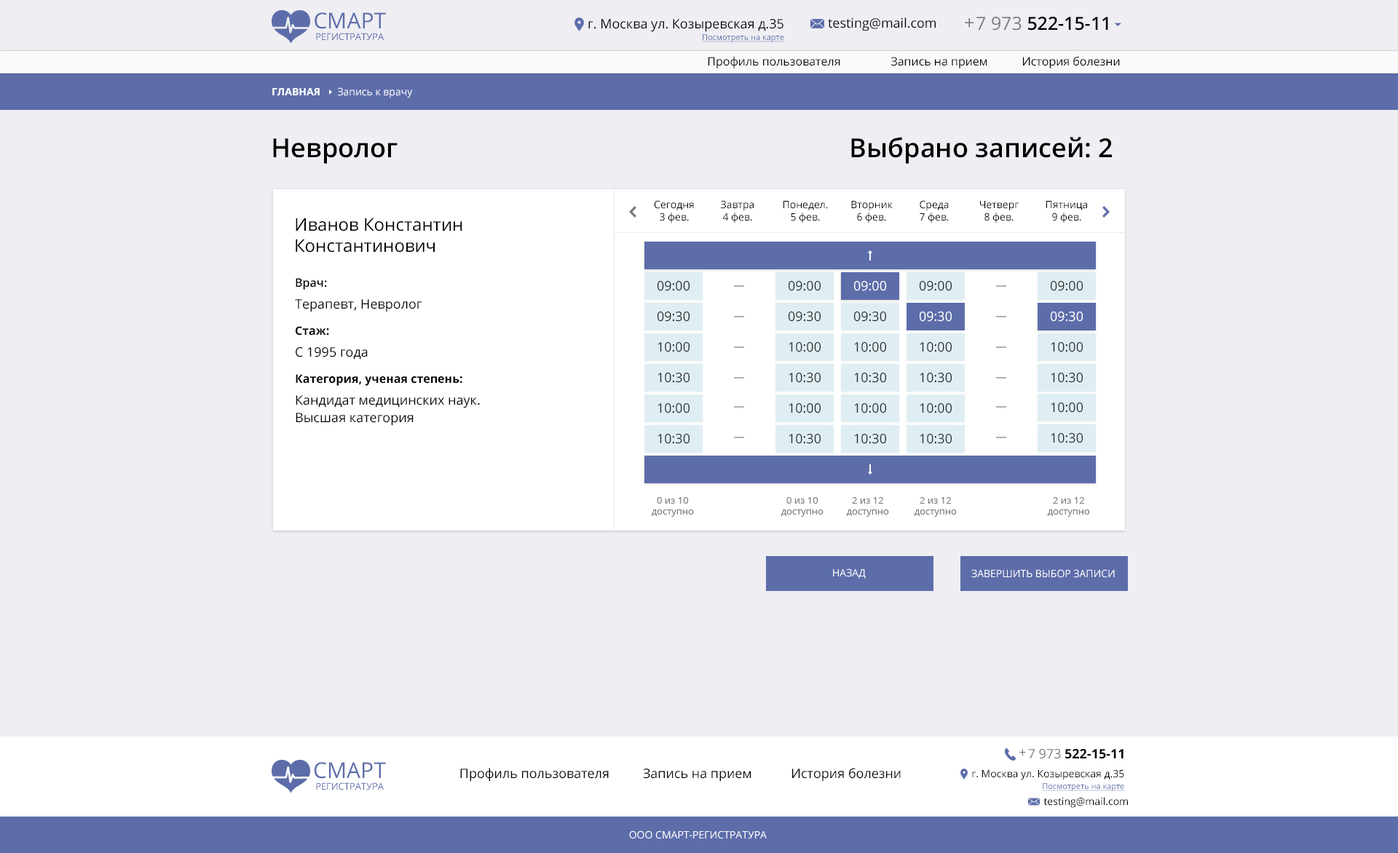
<style>
.page{position:relative;width:1398px;height:853px;background:#eeeef3}
.page>*{position:absolute;margin:0}
.t1{font:9.5px/11.6px "OpenSans";letter-spacing:-0.005em;color:#5d6daa}
.t2{font:21.8px/11.6px "OpenSans";color:#5d6daa}
.t3{font:13.1px "OpenSans";color:#000000}
.t4{font:18.2px "OpenSans-Semibold";color:#000000}
.t5{font:18.2px "OpenSans";color:#000000}
.t6{font:18.2px "OpenSans";color:#7b7b81}
.t7{font:13.1px/10.2px "OpenSans";color:#000000}
.t8{font:8px/11.6px "OpenSans";color:#5d6daa;text-decoration:underline}
.t9{font:11.6px "OpenSans";color:#000000}
.t10{font:10.2px "OpenSans";color:#ffffff}
.t11{font:10.2px "OpenSans-Bold";color:#ffffff}
.t12{font:26.3px "OpenSans-Semibold";color:#000000}
.t13{font:10.2px "OpenSans";color:#000000}
.t14{font:17.5px "OpenSans";color:#000000}
.t15{font:11.6px/26.2px "OpenSans-Bold";color:#000000}
.t16{font:11.6px/17.5px "OpenSans-Semibold";color:#000000}
.t17{font:13.1px/21.8px "OpenSans";color:#000000}
.t18{font:13.1px/17.5px "OpenSans";color:#000000}
.t19{font:13.1px "OpenSans";color:#2d2d2d}
.t20{font:13.1px "OpenSans";color:#ffffff}
.t21{font:13.1px "OpenSans";color:#fffefe}
.t22{font:9.5px "OpenSans";color:#7b7b81}
.t23{font:10.2px "OpenSans";color:#ffffff;text-transform:uppercase}
.t24{font:13.1px "OpenSans";color:#7b7b81}
.t25{font:13.1px "OpenSans-Bold";color:#000000}
.t26{font:10.2px/10.2px "OpenSans";color:#000000}
</style>
<div class="page">
<p class="t1" style="left:314px;top:12px;width:72px;height:28px;text-align:center"><span class="t2">CМАРТ<br></span>РЕГИСТРАТУРА</p>
<p class="t3" style="left:828px;top:17px;width:107px;height:14px">testing@mail.com</p>
<p class="t4" style="left:976px;top:17px;width:132px;height:14px"><span class="t5">  </span><span class="t6">7 973 </span>522-15-11</p>
<p class="t7" style="left:588px;top:19px;width:196px;height:23px;text-align:right">г. Москва ул. Козыревская д.35<br><span class="t8">Посмотреть на карте</span></p>
<p class="t6" style="left:965px;top:18px;width:8px;height:10px">+</p>
<p class="t9" style="left:708px;top:56px;width:412px;height:12px">Профиль пользователя  Запись на прием  История болезни</p>
<p class="t10" style="left:272px;top:87px;width:141px;height:11px"><span class="t11">ГЛАВНАЯ      </span>Запись к врачу</p>
<p class="t12" style="left:851px;top:137px;width:261px;height:27px">Выбрано записей: 2</p>
<p class="t12" style="left:273px;top:138px;width:124px;height:26px">Невролог</p>
<p class="t13" style="left:654px;top:200px;width:40px;height:23px;text-align:center">Сегодня<br>3 фев.</p>
<p class="t13" style="left:721px;top:200px;width:32px;height:23px;text-align:center">Завтра<br>4 фев.</p>
<p class="t13" style="left:783px;top:201px;width:45px;height:22px;text-align:center">Понедел.<br>5 фев.</p>
<p class="t13" style="left:851px;top:201px;width:41px;height:22px;text-align:center">Вторник<br>6 фев.</p>
<p class="t13" style="left:919px;top:200px;width:30px;height:23px;text-align:center">Среда<br>7 фев.</p>
<p class="t13" style="left:980px;top:201px;width:38px;height:22px;text-align:center">Четверг<br>8 фев.</p>
<p class="t13" style="left:1046px;top:201px;width:41px;height:22px;text-align:center">Пятница<br>9 фев.</p>
<p class="t14" style="left:296px;top:218px;width:166px;height:35px">Иванов Константин<br>Константинович</p>
<p class="t15" style="left:295px;top:278px;width:185px;height:148px"><span class="t16">Врач:<br></span><span class="t17">Терапевт, Невролог<br></span>Стаж:<br><span class="t17">С 1995 года<br></span>Категория, ученая степень:<br><span class="t17">Кандидат медицинских наук. <br></span><span class="t18">Высшая категория</span></p>
<p class="t19" style="left:657px;top:281px;width:32px;height:10px">09:00</p>
<p class="t19" style="left:788px;top:281px;width:32px;height:10px">09:00</p>
<p class="t20" style="left:854px;top:281px;width:32px;height:10px">09:00</p>
<p class="t19" style="left:919px;top:281px;width:32px;height:10px">09:00</p>
<p class="t19" style="left:1050px;top:281px;width:32px;height:10px">09:00</p>
<p class="t19" style="left:657px;top:312px;width:32px;height:10px">09:30</p>
<p class="t19" style="left:788px;top:312px;width:32px;height:10px">09:30</p>
<p class="t19" style="left:854px;top:312px;width:32px;height:10px">09:30</p>
<p class="t20" style="left:919px;top:312px;width:32px;height:10px">09:30</p>
<p class="t21" style="left:1050px;top:312px;width:32px;height:10px">09:30</p>
<p class="t19" style="left:657px;top:342px;width:32px;height:10px">10:00</p>
<p class="t19" style="left:788px;top:342px;width:32px;height:10px">10:00</p>
<p class="t19" style="left:854px;top:342px;width:32px;height:10px">10:00</p>
<p class="t19" style="left:919px;top:342px;width:32px;height:10px">10:00</p>
<p class="t19" style="left:1050px;top:342px;width:32px;height:10px">10:00</p>
<p class="t19" style="left:657px;top:373px;width:32px;height:10px">10:30</p>
<p class="t19" style="left:788px;top:373px;width:32px;height:10px">10:30</p>
<p class="t19" style="left:854px;top:373px;width:32px;height:10px">10:30</p>
<p class="t19" style="left:919px;top:373px;width:32px;height:10px">10:30</p>
<p class="t19" style="left:1050px;top:373px;width:32px;height:10px">10:30</p>
<p class="t19" style="left:657px;top:403px;width:32px;height:10px">10:00</p>
<p class="t19" style="left:788px;top:403px;width:32px;height:10px">10:00</p>
<p class="t19" style="left:854px;top:403px;width:32px;height:10px">10:00</p>
<p class="t19" style="left:919px;top:403px;width:32px;height:10px">10:00</p>
<p class="t19" style="left:1050px;top:403px;width:32px;height:10px">10:00</p>
<p class="t19" style="left:657px;top:434px;width:32px;height:10px">10:30</p>
<p class="t19" style="left:788px;top:434px;width:32px;height:10px">10:30</p>
<p class="t19" style="left:854px;top:434px;width:32px;height:10px">10:30</p>
<p class="t19" style="left:919px;top:434px;width:32px;height:10px">10:30</p>
<p class="t19" style="left:1050px;top:433px;width:32px;height:10px">10:30</p>
<p class="t22" style="left:651px;top:497px;width:43px;height:20px;text-align:center">0 из 10<br>доступно</p>
<p class="t22" style="left:780px;top:497px;width:43px;height:20px;text-align:center">0 из 10<br>доступно</p>
<p class="t22" style="left:846px;top:497px;width:43px;height:20px;text-align:center">2 из 12<br>доступно</p>
<p class="t22" style="left:914px;top:497px;width:43px;height:20px;text-align:center">2 из 12<br>доступно</p>
<p class="t22" style="left:1047px;top:497px;width:43px;height:20px;text-align:center">2 из 12<br>доступно</p>
<p class="t23" style="left:833px;top:569px;width:33px;height:10px">НАЗАД</p>
<p class="t23" style="left:971px;top:569px;width:143px;height:9px">ЗАВЕРШИТЬ ВЫБОР ЗАПИСИ</p>
<p class="t24" style="left:1019px;top:749px;width:7px;height:7px">+</p>
<p class="t25" style="left:1028px;top:749px;width:95px;height:10px"><span class="t3">  </span><span class="t24">7 973 </span>522-15-11</p>
<p class="t1" style="left:314px;top:762px;width:72px;height:28px;text-align:center"><span class="t2">CМАРТ<br></span>РЕГИСТРАТУРА</p>
<p class="t3" style="left:460px;top:768px;width:440px;height:14px">Профиль пользователя  Запись на прием      История болезни</p>
<p class="t26" style="left:972px;top:769px;width:153px;height:22px;text-align:right">г. Москва ул. Козыревская д.35<br><span class="t8">Посмотреть на карте</span></p>
<p class="t13" style="left:1043px;top:797px;width:85px;height:11px">testing@mail.com</p>
<p class="t10" style="left:629px;top:831px;width:138px;height:8px">ООО СМАРТ-РЕГИСТРАТУРА</p>
</div>
